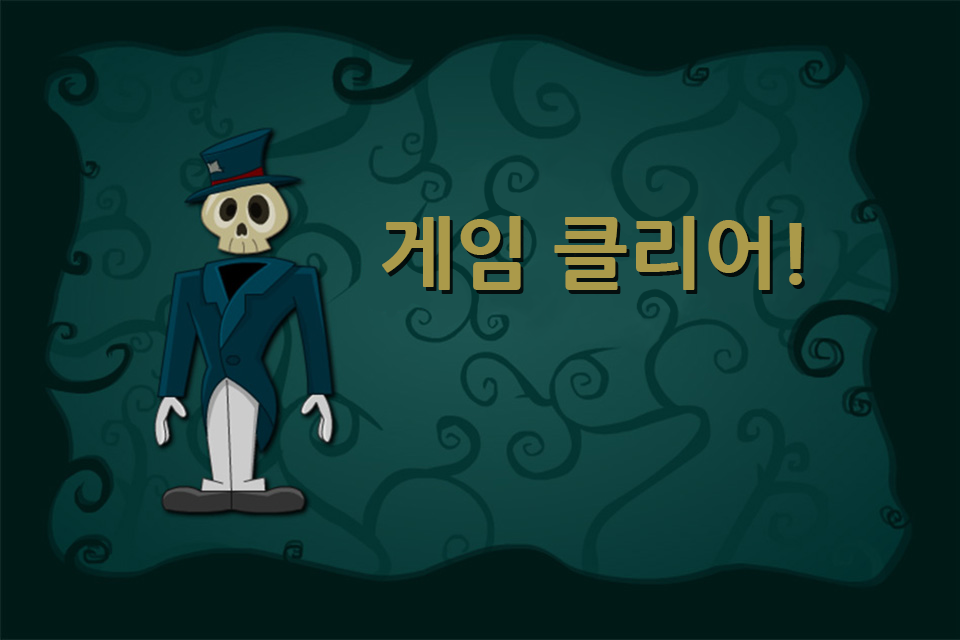
<style>
.page{position:relative;width:960px;height:640px;background:#001916}
.page>*{position:absolute;margin:0}
.t1{font:80px "NanumGothicExtraBold";color:#ab9a4a}
</style>
<div class="page">
<p class="t1" style="left:382px;top:216px;width:420px;height:74px">게임 클리어!</p>
</div>
